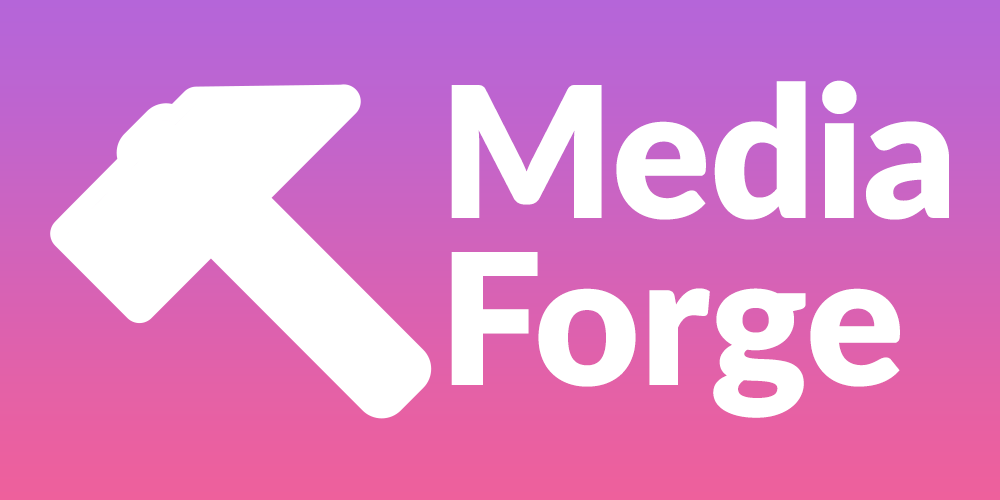
<style>
.page{position:relative;width:1000px;height:500px;background:#ffffff}
.page>*{position:absolute;margin:0}
.t1{font:182.5px/166.7px "Lato-Black";color:#ffffff}
</style>
<div class="page">
<p class="t1" style="left:451px;top:80px;width:498px;height:338px">Media<br>Forge</p>
</div>
